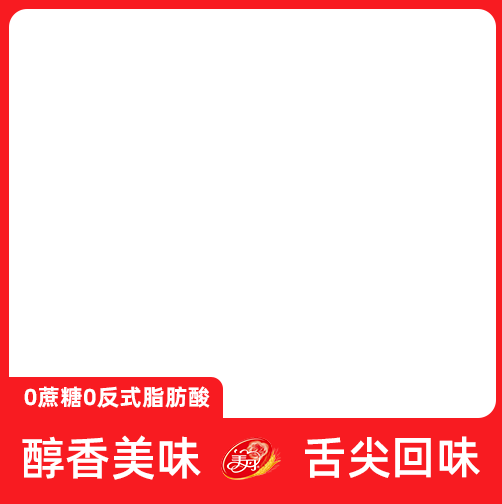
<style>
.page{position:relative;width:502px;height:504px;background:#ffffff}
.page>*{position:absolute;margin:0}
.t1{font:23.1px "AlibabaPuHuiTi-Bold";color:#ffffff}
.t2{font:46.2px "AlibabaPuHuiTi-Medium";color:#ffffff}
.t3{font:45.4px "AlibabaPuHuiTi-Medium";color:#ffffff}
</style>
<div class="page">
<p class="t1" style="left:24px;top:386px;width:186px;height:22px">0蔗糖0反式脂肪酸</p>
<p class="t2" style="left:22px;top:435px;width:179px;height:45px">醇香美味</p>
<p class="t3" style="left:305px;top:436px;width:175px;height:42px">舌尖回味</p>
</div>
